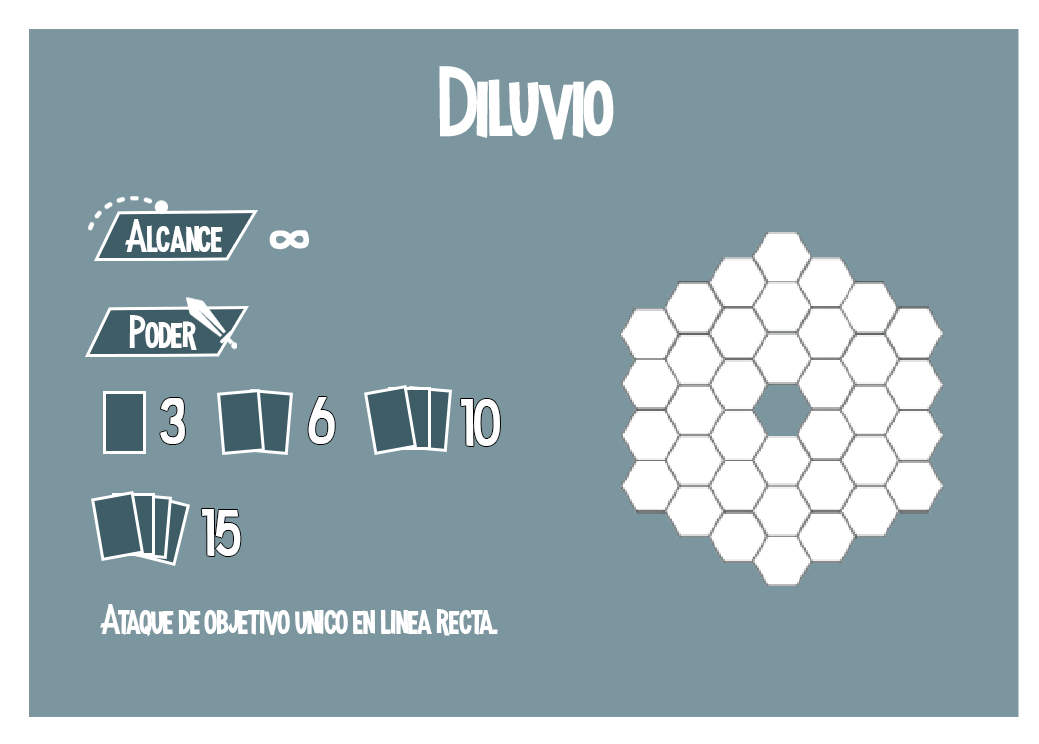
<style>
.page{position:relative;width:1039px;height:744px;background:#7c969f}
.page>*{position:absolute;margin:0}
.t1{font:100px "MadnessHyperactive";color:#ffffff}
.t2{font:45.8px "MadnessHyperactive";color:#ffffff}
.t3{font:55.8px "MadnessHyperactive";color:#ffffff}
.t4{font:66.3px "MadnessHyperactive";color:#ffffff}
.t5{font:41.7px "MadnessHyperactive";color:#ffffff}
</style>
<div class="page">
<p class="t1" style="left:439px;top:66px;width:175px;height:74px">Diluvio</p>
<p class="t2" style="left:125px;top:219px;width:98px;height:33px">Alcance</p>
<p class="t3" style="left:269px;top:230px;width:40px;height:20px;rotate:90deg">8</p>
<p class="t2" style="left:129px;top:315px;width:68px;height:35px">Poder</p>
<p class="t4" style="left:160px;top:398px;width:25px;height:46px">3</p>
<p class="t4" style="left:308px;top:397px;width:27px;height:47px">6</p>
<p class="t4" style="left:460px;top:399px;width:40px;height:48px">10</p>
<p class="t4" style="left:201px;top:509px;width:40px;height:48px">15</p>
<p class="t5" style="left:100px;top:604px;width:398px;height:33px">Ataque de objetivo unico en linea recta.</p>
</div>
